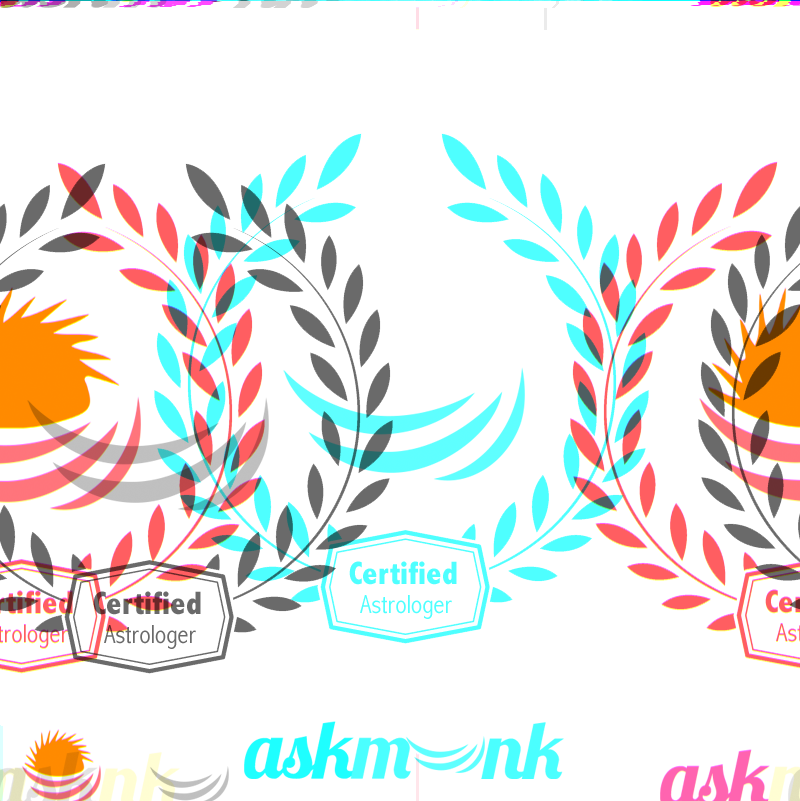
<style>
.page{position:relative;width:800px;height:801px;background:#ffffff}
.page>*{position:absolute;margin:0}
.t1{font:32.4px "AbadiMT-CondensedExtraBold";color:#4effff}
.t2{font:26.4px "AbadiMT-CondensedLight"}
</style>
<div class="page">
<p class="t1" style="left:349px;top:560px;width:108px;height:24px">Certified</p>
<p class="t2" style="left:360px;top:594px;width:92px;height:24px">Astrologer</p>
</div>
